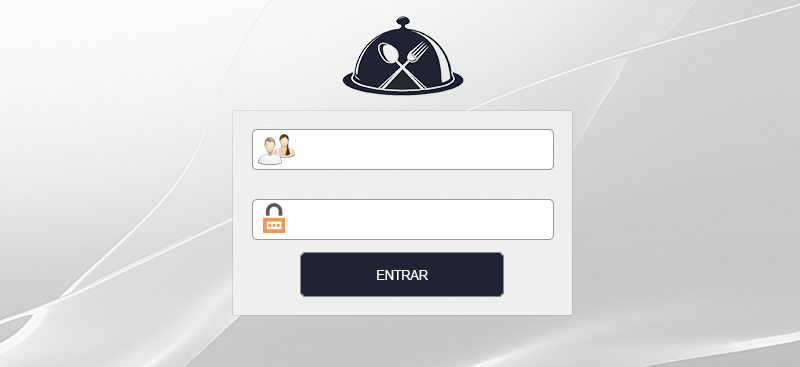
<style>
.page{position:relative;width:800px;height:367px}
.page>*{position:absolute;margin:0}
.t1{font:12.5px "ArialMT";color:#ffffff}
</style>
<div class="page">
<p class="t1" style="left:377px;top:270px;width:51px;height:10px">ENTRAR</p>
</div>
